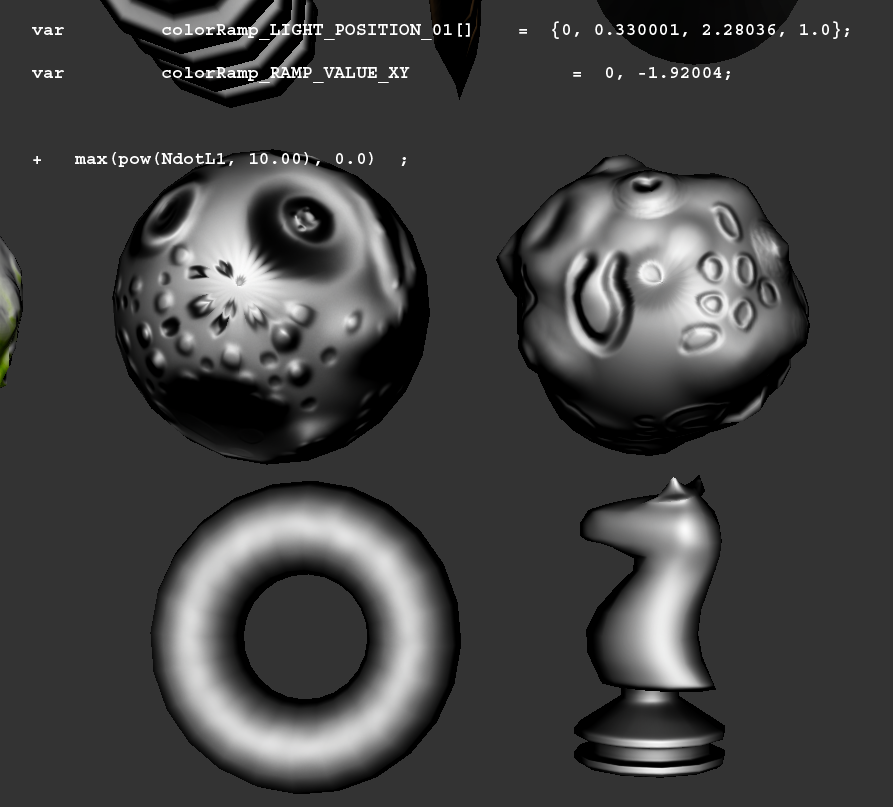
<style>
.page{position:relative;width:893px;height:807px;background:#333333}
.page>*{position:absolute;margin:0}
.t1{font:18px "Courier-Bold";color:#ffffff}
</style>
<div class="page">
<p class="t1" style="left:32px;top:21px;width:817px;height:146px">var         colorRamp_LIGHT_POSITION_01[]    =  {0, 0.330001, 2.28036, 1.0};<br><br>var         colorRamp_RAMP_VALUE_XY               =  0, -1.92004;<br><br><br><br>+   max(pow(NdotL1, 10.00), 0.0)  ;</p>
</div>
